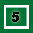
<style>
.page{position:relative;width:33px;height:33px;background:#007236}
.page>*{position:absolute;margin:0}
.t1{font:14px "Arial-Black";color:#000603}
</style>
<div class="page">
<p class="t1" style="left:12px;top:12px;width:7px;height:10px">5</p>
</div>
